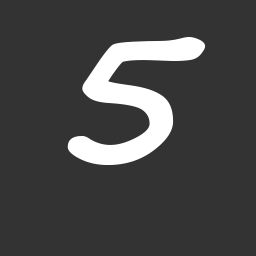
<style>
.page{position:relative;width:256px;height:256px;background:#333333}
.page>*{position:absolute;margin:0}
.t1{font:192.4px "SegoePrint-Bold";letter-spacing:0.025em;color:#ffffff}
</style>
<div class="page">
<p class="t1" style="left:67px;top:37px;width:139px;height:128px">5</p>
</div>
